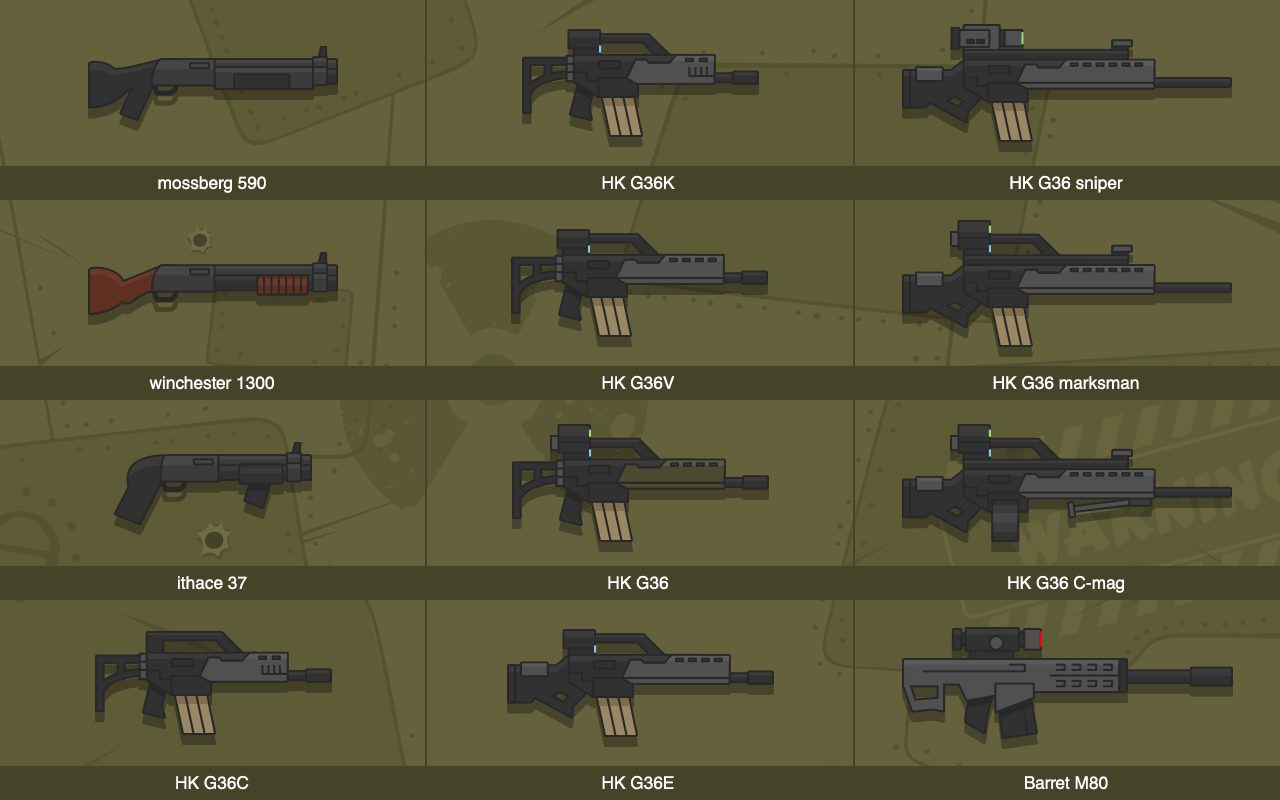
<style>
.page{position:relative;width:1280px;height:800px;background:#64613c}
.page>*{position:absolute;margin:0}
.t1{font:17.4px/200px "HelveticaCE-Regular";color:#ffffff}
</style>
<div class="page">
<p class="t1" style="left:149px;top:176px;width:125px;height:614px;text-align:center">mossberg 590<br>winchester 1300<br>ithace 37<br>HK G36C</p>
<p class="t1" style="left:602px;top:175px;width:73px;height:615px;text-align:center">HK G36K<br>HK G36V<br>HK G36<br>HK G36E</p>
<p class="t1" style="left:993px;top:175px;width:146px;height:615px;text-align:center">HK G36 sniper<br>HK G36 marksman<br>HK G36 C-mag<br>Barret M80</p>
</div>
